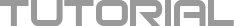
<style>
.page{position:relative;width:234px;height:26px;background:#ffffff}
.page>*{position:absolute;margin:0}
.t1{font:50px "Bitsumishi";color:#999999}
</style>
<div class="page">
<p class="t1" style="left:0px;top:0px;width:234px;height:26px">tutorial</p>
</div>
